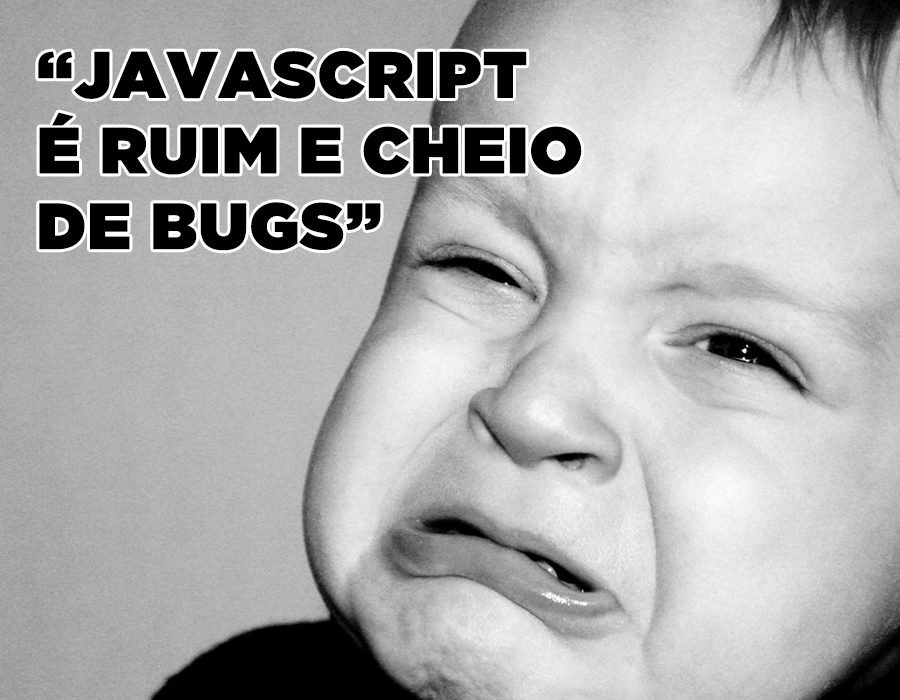
<style>
.page{position:relative;width:900px;height:700px}
.page>*{position:absolute;margin:0}
.t1{font:65px/75.7px "GothamUltra";color:#000000;font-weight:bold}
</style>
<div class="page">
<p class="t1" style="left:38px;top:50px;width:544px;height:201px">“JAVASCRIPT<br>É RUIM E CHEIO<br>DE BUGS”</p>
</div>
